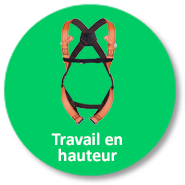
<style>
.page{position:relative;width:185px;height:185px;background:#00cc66}
.page>*{position:absolute;margin:0}
.t1{font:18px/16px "Calibri-Bold";color:#ffffff}
</style>
<div class="page">
<p class="t1" style="left:51px;top:132px;width:71px;height:30px;text-align:center">Travail en <br>hauteur</p>
</div>
